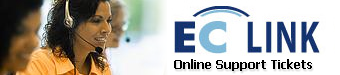
<style>
.page{position:relative;width:340px;height:75px;background:#ffffff}
.page>*{position:absolute;margin:0}
.t1{font:12px "Tahoma-Bold";color:#000000}
</style>
<div class="page">
<p class="t1" style="left:174px;top:59px;width:138px;height:12px">Online Support Tickets</p>
</div>
